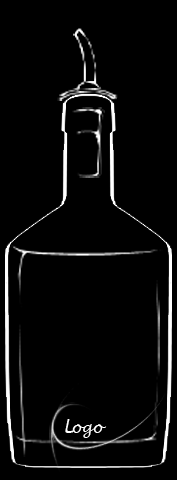
<style>
.page{position:relative;width:177px;height:480px;background:#000000}
.page>*{position:absolute;margin:0}
.t1{font:16.8px "LucidaHandwriting-Italic";color:#ffffff}
.t2{font:15.3px "LucidaHandwriting-Italic";color:#ffffff}
</style>
<div class="page">
<p class="t1" style="left:65px;top:419px;width:9px;height:14px">L</p>
<p class="t2" style="left:72px;top:424px;width:35px;height:14px">ogo</p>
</div>
